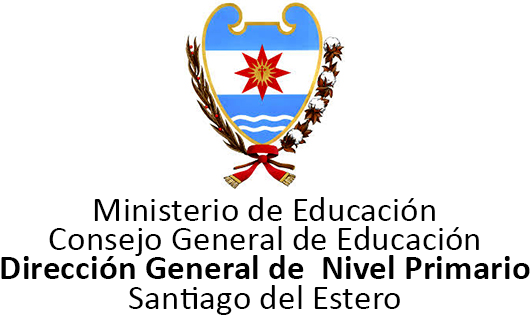
<style>
.page{position:relative;width:531px;height:315px;background:#ffffff}
.page>*{position:absolute;margin:0}
.t1{font:35.4px/29.2px "Calibri";color:#000000}
.t2{font:35.4px/29.2px "Calibri-Bold";color:#000000}
</style>
<div class="page">
<p class="t1" style="left:1px;top:197px;width:529px;height:118px;text-align:center">Ministerio de Educación<br>Consejo General de Educación<br><span class="t2">Dirección General de  Nivel Primario<br></span>Santiago del Estero</p>
</div>
